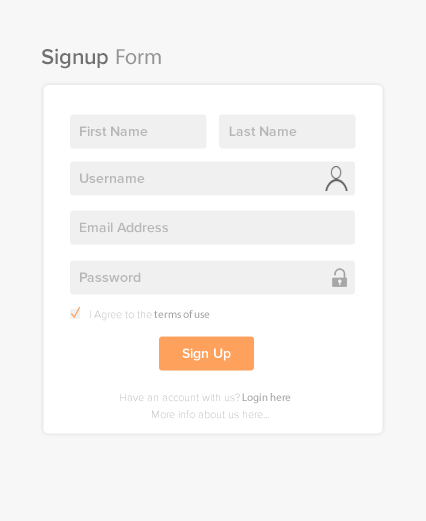
<style>
.page{position:relative;width:426px;height:521px;background:#f7f7f7}
.page>*{position:absolute;margin:0}
.t1{font:22px "ProximaNova-Semibold";color:#707070}
.t2{font:22px "MyriadPro-Regular";color:#949494}
.t3{font:14px "ProximaNova-Semibold";color:#b7b7b7}
.t4{font:11px "ProximaNova-Light";color:#b7b7b7}
.t5{font:11px "MyriadPro-Regular";color:#9b9b9b}
.t6{font:14px "ProximaNova-Semibold";color:#ffffff}
</style>
<div class="page">
<p class="t1" style="left:41px;top:48px;width:120px;height:21px">Signup <span class="t2">Form</span></p>
<p class="t3" style="left:80px;top:126px;width:68px;height:10px">First Name</p>
<p class="t3" style="left:229px;top:126px;width:68px;height:10px">Last Name</p>
<p class="t3" style="left:80px;top:173px;width:65px;height:10px">Username</p>
<p class="t3" style="left:80px;top:222px;width:88px;height:11px">Email Address</p>
<p class="t3" style="left:80px;top:272px;width:61px;height:10px">Password</p>
<p class="t4" style="left:90px;top:310px;width:120px;height:11px">I Agree to the <span class="t5">terms of use</span></p>
<p class="t6" style="left:182px;top:348px;width:49px;height:13px">Sign Up</p>
<p class="t4" style="left:120px;top:393px;width:171px;height:11px">Have an account with us? <span class="t5">Login here</span></p>
<p class="t4" style="left:152px;top:410px;width:117px;height:9px">More info about us here...</p>
</div>
